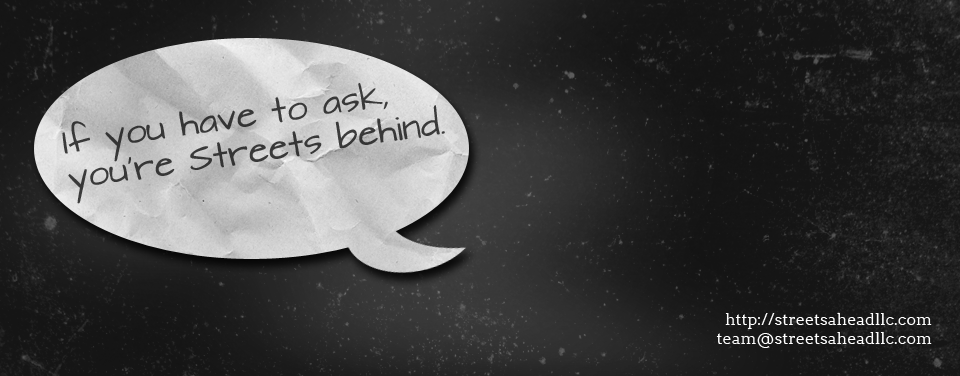
<style>
.page{position:relative;width:960px;height:376px}
.page>*{position:absolute;margin:0}
.t1{font:30px "ArchitectsDaughter";color:#383838}
.t2{font:16px "Arvo";color:#ffffff}
</style>
<div class="page">
<p class="t1" style="left:62px;top:83px;width:383px;height:121px;rotate:-8deg">If you have to ask,<br>you’re Streets behind.</p>
<p class="t2" style="left:716px;top:313px;width:216px;height:35px;text-align:right">http://streetsaheadllc.com<br>team@streetsaheadllc.com</p>
</div>
